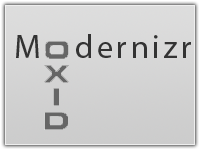
<style>
.page{position:relative;width:200px;height:150px}
.page>*{position:absolute;margin:0}
.t1{font:33px "MyriadPro-Regular";letter-spacing:0.1em;color:#333333}
</style>
<div class="page">
<p class="t1" style="left:16px;top:34px;width:175px;height:24px">M   dernizr</p>
</div>
